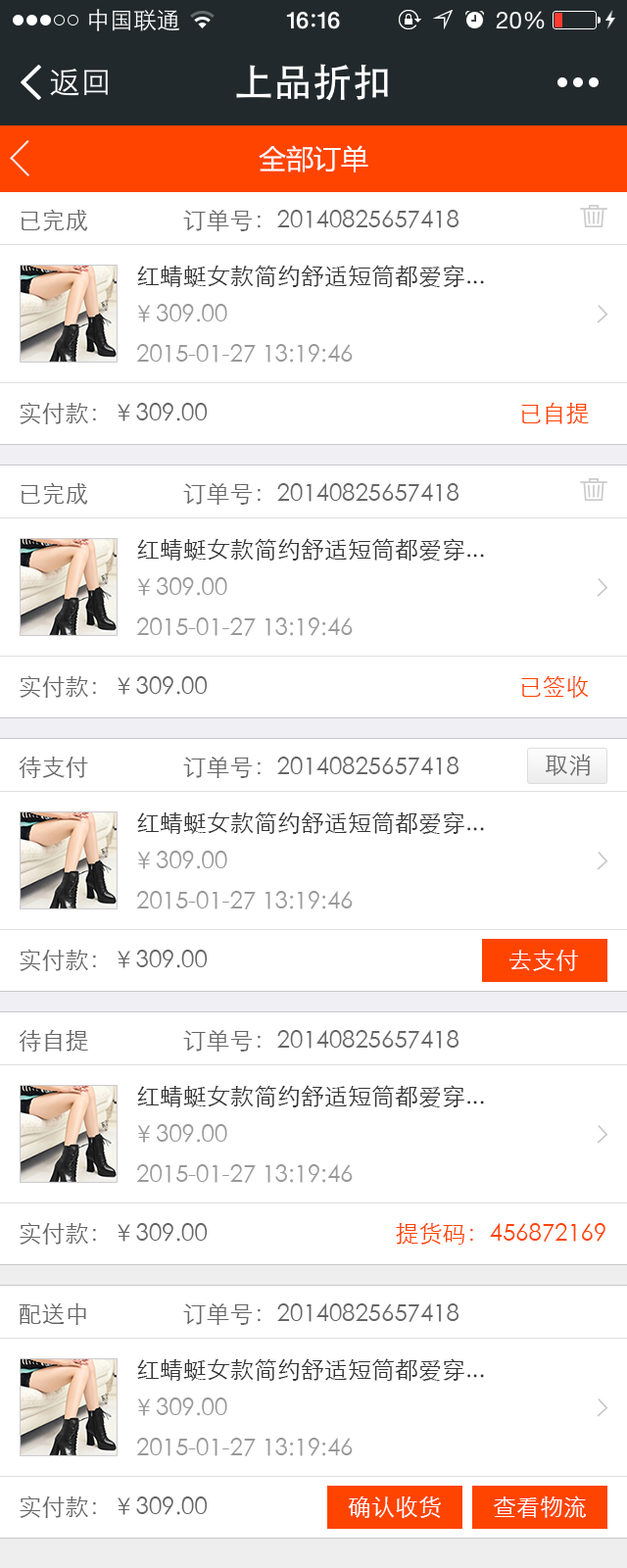
<style>
.page{position:relative;width:627px;height:1568px;background:#ffffff}
.page>*{position:absolute;margin:0}
.t1{font:27.4px "MicrosoftYaHei";color:#ffffff}
.t2{font:23.5px "STXihei";color:#666666}
.t3{font:23.5px "STXihei";color:#333333}
.t4{font:23.5px "STXihei";color:#999999}
.t5{font:23.5px "STXihei";color:#ff4400}
.t6{font:23.5px "STXihei";color:#ffffff}
</style>
<div class="page">
<p class="t1" style="left:259px;top:145px;width:109px;height:27px">全部订单</p>
<p class="t2" style="left:21px;top:209px;width:439px;height:22px">已完成                订单号：20140825657418</p>
<p class="t3" style="left:137px;top:265px;width:347px;height:22px">红蜻蜓女款简约舒适短筒都爱穿...</p>
<p class="t4" style="left:137px;top:304px;width:90px;height:18px">￥309.00</p>
<p class="t4" style="left:136px;top:344px;width:217px;height:19px">2015-01-27 13:19:46</p>
<p class="t2" style="left:20px;top:402px;width:569px;height:22px">实付款：￥309.00                                             <span class="t5">　　已自提</span></p>
<p class="t2" style="left:21px;top:482px;width:439px;height:23px">已完成                订单号：20140825657418</p>
<p class="t3" style="left:137px;top:538px;width:347px;height:23px">红蜻蜓女款简约舒适短筒都爱穿...</p>
<p class="t4" style="left:137px;top:577px;width:90px;height:19px">￥309.00</p>
<p class="t4" style="left:136px;top:617px;width:217px;height:19px">2015-01-27 13:19:46</p>
<p class="t2" style="left:20px;top:675px;width:569px;height:23px">实付款：￥309.00                                             　　<span class="t5">已签收</span></p>
<p class="t2" style="left:19px;top:756px;width:441px;height:22px">待支付                订单号：20140825657418</p>
<p class="t2" style="left:546px;top:754px;width:45px;height:22px">取消</p>
<p class="t3" style="left:137px;top:811px;width:347px;height:23px">红蜻蜓女款简约舒适短筒都爱穿...</p>
<p class="t4" style="left:137px;top:851px;width:90px;height:18px">￥309.00</p>
<p class="t4" style="left:136px;top:891px;width:217px;height:18px">2015-01-27 13:19:46</p>
<p class="t2" style="left:20px;top:949px;width:188px;height:22px">实付款：￥309.00</p>
<p class="t6" style="left:510px;top:949px;width:69px;height:22px">去支付</p>
<p class="t2" style="left:19px;top:1029px;width:441px;height:23px">待自提                订单号：20140825657418</p>
<p class="t3" style="left:137px;top:1085px;width:347px;height:22px">红蜻蜓女款简约舒适短筒都爱穿...</p>
<p class="t4" style="left:137px;top:1124px;width:90px;height:19px">￥309.00</p>
<p class="t4" style="left:136px;top:1164px;width:217px;height:19px">2015-01-27 13:19:46</p>
<p class="t5" style="left:20px;top:1222px;width:586px;height:23px"><span class="t2">实付款：￥309.00                                </span>提货码：456872169</p>
<p class="t2" style="left:19px;top:1302px;width:441px;height:23px">配送中                订单号：20140825657418</p>
<p class="t3" style="left:137px;top:1358px;width:347px;height:23px">红蜻蜓女款简约舒适短筒都爱穿...</p>
<p class="t4" style="left:137px;top:1397px;width:90px;height:19px">￥309.00</p>
<p class="t4" style="left:136px;top:1438px;width:217px;height:18px">2015-01-27 13:19:46</p>
<p class="t2" style="left:20px;top:1495px;width:188px;height:23px">实付款：￥309.00</p>
<p class="t6" style="left:348px;top:1495px;width:93px;height:23px">确认收货</p>
<p class="t6" style="left:493px;top:1495px;width:93px;height:23px">查看物流</p>
</div>
